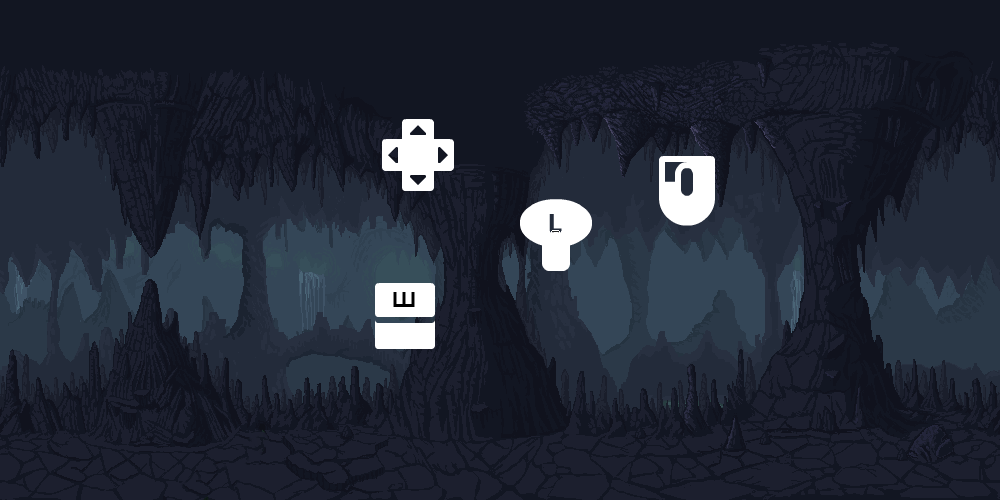
<style>
.page{position:relative;width:1000px;height:500px;background:#121622}
.page>*{position:absolute;margin:0}
.t1{font:24px "Kenney-Rocket-Square";color:#000000}
</style>
<div class="page">
<p class="t1" style="left:393px;top:292px;width:22px;height:15px">W</p>
</div>
